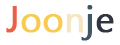
<style>
.page{position:relative;width:120px;height:45px;background:#ffffff}
.page>*{position:absolute;margin:0}
.t1{font:36px "SegoeUI";color:#f8ca4d;font-weight:bold}
.t2{font:36px "SegoeUI";color:#ea6045;font-weight:bold}
.t3{font:36px "SegoeUI";color:#f5e5c0;font-weight:bold}
.t4{font:36px "SegoeUI";color:#3f5666;font-weight:bold}
.t5{font:36px "SegoeUI";color:#2f3440;font-weight:bold}
</style>
<div class="page">
<p class="t1" style="left:6px;top:5px;width:108px;height:36px"><span class="t2">J</span>oo<span class="t3">n</span><span class="t4">j</span><span class="t5">e</span></p>
</div>
